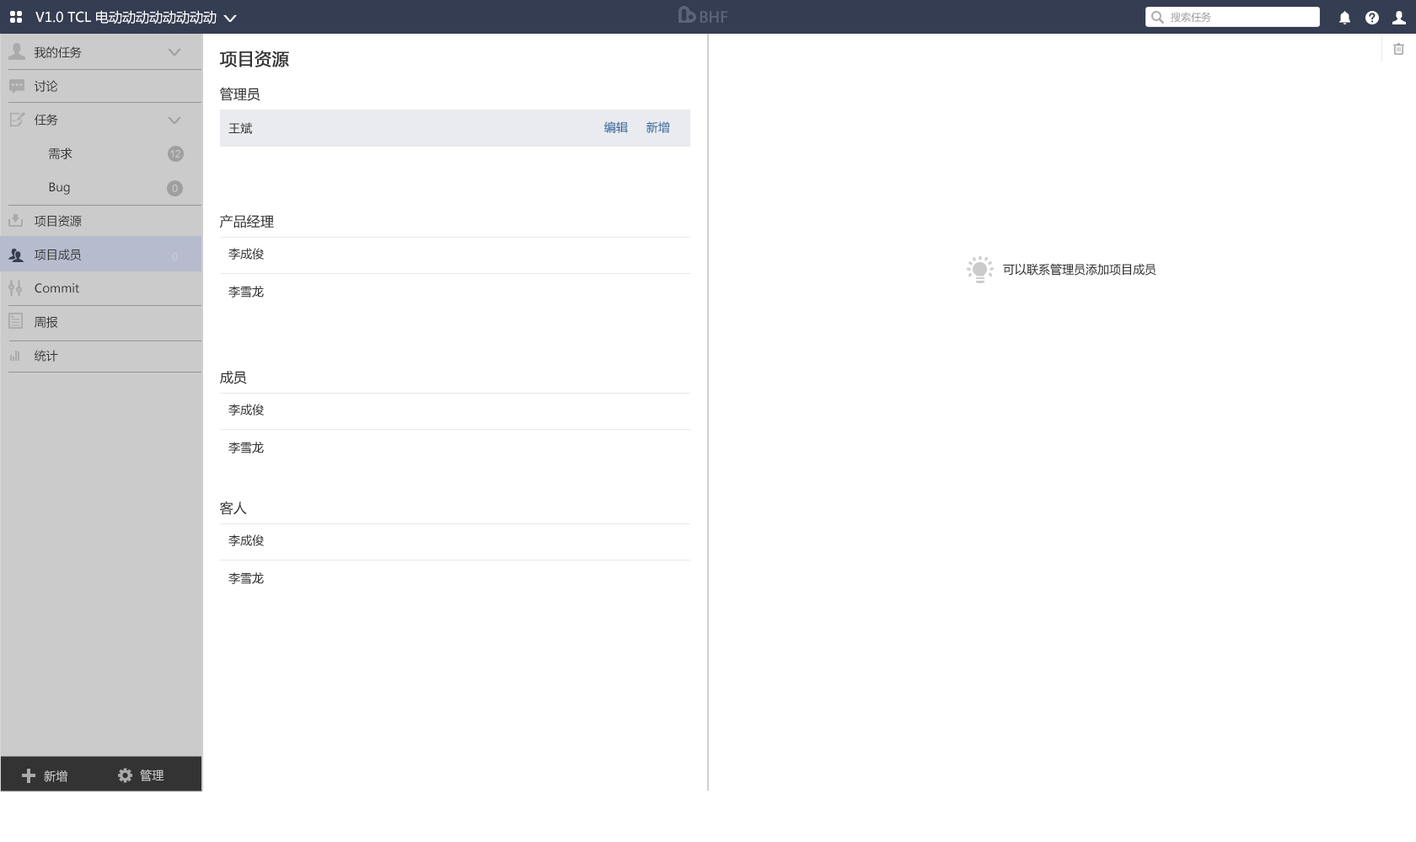
<style>
.page{position:relative;width:1416px;height:842px;background:#ffffff}
.page>*{position:absolute;margin:0}
.t1{font:13.5px "MicrosoftYaHei";color:#ffffff}
.t2{font:16.9px "MyriadPro-Regular";color:#5c6479;font-weight:bold}
.t3{font:10.1px "MicrosoftYaHei";color:#999999}
.t4{font:11.8px/33.7px "MicrosoftYaHei";color:#333333}
.t5{font:11.8px/40.5px "MicrosoftYaHei";color:#333333}
.t6{font:16.9px "MicrosoftYaHei";color:#333333;font-weight:bold}
.t7{font:13.5px "MicrosoftYaHei";color:#333333}
.t8{font:11.8px "MicrosoftYaHei";color:#333333}
.t9{font:11.8px "MicrosoftYaHei";color:#336699}
.t10{font:10.1px "ArialMT";color:#cfcfcf}
.t11{font:11.8px "MicrosoftYaHei";color:#cbcbcb}
</style>
<div class="page">
<p class="t1" style="left:35px;top:10px;width:182px;height:14px">V1.0 TCL 电动动动动动动动动</p>
<p class="t2" style="left:700px;top:11px;width:28px;height:12px">BHF</p>
<p class="t3" style="left:1171px;top:12px;width:40px;height:11px">搜索任务</p>
<p class="t4" style="left:34px;top:46px;width:48px;height:316px">我的任务<br>讨论<br>任务<br>    需求<br>    Bug<br>项目资源<br>项目成员<br>Commit<br>周报<br><span class="t5">统计</span></p>
<p class="t6" style="left:219px;top:51px;width:70px;height:16px">项目资源</p>
<p class="t7" style="left:220px;top:87px;width:40px;height:14px">管理员</p>
<p class="t8" style="left:228px;top:122px;width:24px;height:12px">王斌</p>
<p class="t9" style="left:604px;top:121px;width:24px;height:12px">编辑</p>
<p class="t9" style="left:647px;top:121px;width:22px;height:12px">新增</p>
<p class="t10" style="left:170px;top:150px;width:10px;height:8px">12</p>
<p class="t10" style="left:172px;top:185px;width:6px;height:7px">0</p>
<p class="t7" style="left:219px;top:214px;width:55px;height:14px">产品经理</p>
<p class="t10" style="left:172px;top:253px;width:6px;height:7px">0</p>
<p class="t8" style="left:228px;top:248px;width:36px;height:12px">李成俊</p>
<p class="t8" style="left:1003px;top:263px;width:153px;height:13px">可以联系管理员添加项目成员</p>
<p class="t8" style="left:228px;top:286px;width:36px;height:12px">李雪龙</p>
<p class="t7" style="left:220px;top:371px;width:27px;height:13px">成员</p>
<p class="t8" style="left:228px;top:404px;width:36px;height:12px">李成俊</p>
<p class="t8" style="left:228px;top:442px;width:36px;height:11px">李雪龙</p>
<p class="t7" style="left:219px;top:501px;width:28px;height:14px">客人</p>
<p class="t8" style="left:228px;top:534px;width:36px;height:12px">李成俊</p>
<p class="t8" style="left:228px;top:572px;width:36px;height:12px">李雪龙</p>
<p class="t11" style="left:44px;top:770px;width:23px;height:12px">新增</p>
<p class="t11" style="left:140px;top:770px;width:24px;height:11px">管理</p>
</div>
